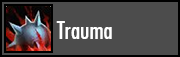
<style>
.page{position:relative;width:180px;height:57px;background:#4c4c4c}
.page>*{position:absolute;margin:0}
.t1{font:24px "FuturaCondensed";color:#ffffff}
</style>
<div class="page">
<p class="t1" style="left:56px;top:21px;width:56px;height:18px">Trauma</p>
</div>
